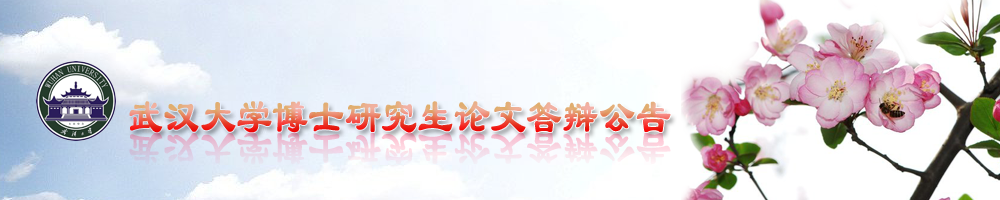
<style>
.page{position:relative;width:1000px;height:200px}
.page>*{position:absolute;margin:0}
.t1{font:47.8px "LiSu";font-weight:bold;scale:0.74 1}
.t2{font:49.2px "LiSu";font-weight:bold;scale:0.72 1}
</style>
<div class="page">
<p class="t1" style="left:129px;top:101px;width:542px;height:32px">武汉大学博士研究生论文答辩公告</p>
<p class="t2" style="left:129px;top:132px;width:542px;height:33px">武汉大学博士研究生论文答辩公告</p>
</div>
